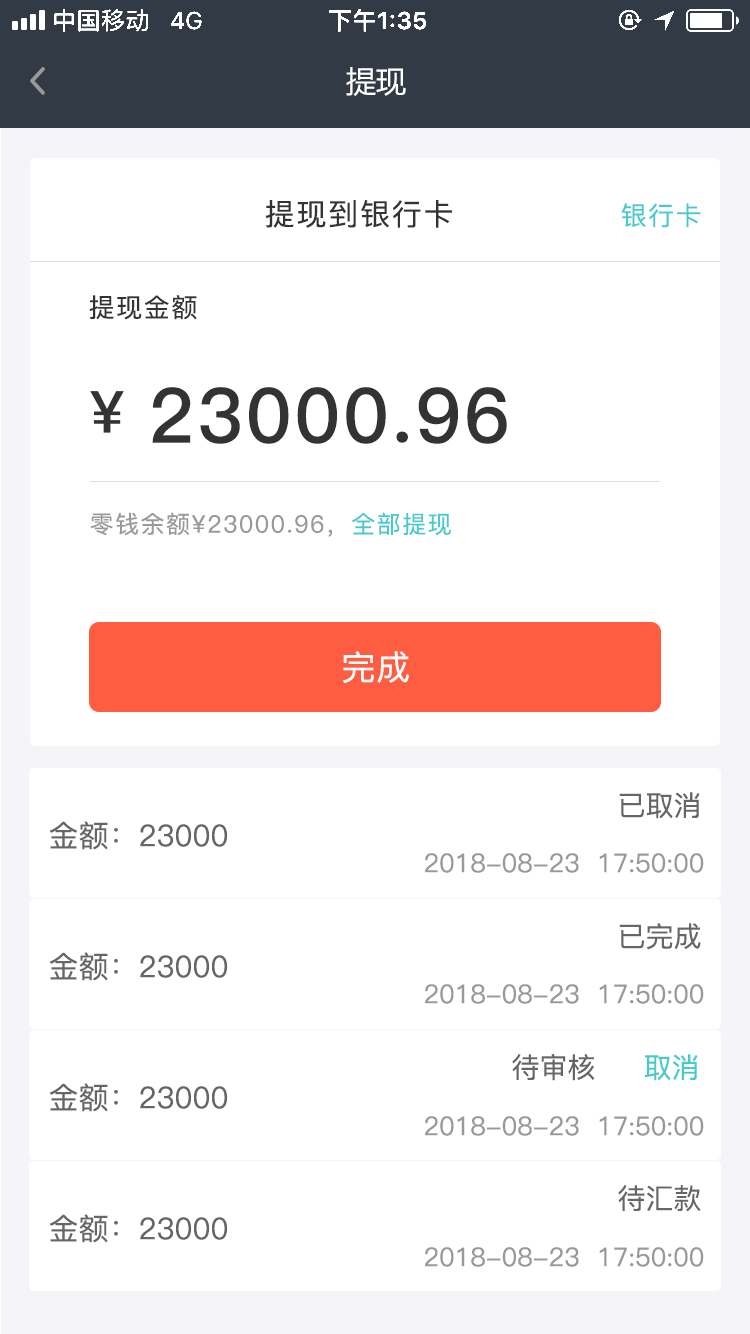
<style>
.page{position:relative;width:750px;height:1334px;background:#ffffff}
.page>*{position:absolute;margin:0}
.t1{font:30px "MicrosoftYaHeiUI";color:#ffffff}
.t2{font:30px "PingFang-SC-Medium";letter-spacing:0.06em;color:#333333}
.t3{font:26px "PingFang-SC-Medium";letter-spacing:0.06em;color:#47cacc}
.t4{font:26px "PingFang-SC-Medium";letter-spacing:0.06em;color:#333333}
.t5{font:76px "PingFang-SC-Bold";letter-spacing:0.04em;color:#333333}
.t6{font:24px "PingFang-SC-Medium";letter-spacing:0.06em;color:#999999}
.t7{font:24px "PingFang-SC-Medium";letter-spacing:0.06em;color:#47cacc}
.t8{font:34px "PingFang-SC-Medium";letter-spacing:0.02em;color:#ffffff}
.t9{font:28px "PingFang-SC-Medium";color:#666666}
.t10{font:30px "PingFang-SC-Medium";color:#666666}
.t11{font:26px "PingFang-SC-Medium";color:#999999}
.t12{font:28px "PingFang-SC-Medium";color:#47cacc}
</style>
<div class="page">
<p class="t1" style="left:346px;top:67px;width:60px;height:29px">提现</p>
<p class="t2" style="left:265px;top:200px;width:187px;height:28px">提现到银行卡</p>
<p class="t3" style="left:621px;top:203px;width:80px;height:25px">银行卡</p>
<p class="t4" style="left:89px;top:295px;width:108px;height:25px">提现金额</p>
<p class="t5" style="left:152px;top:387px;width:355px;height:57px">23000.96</p>
<p class="t6" style="left:90px;top:512px;width:361px;height:25px">零钱余额¥23000.96，<span class="t7">全部提现</span></p>
<p class="t8" style="left:343px;top:651px;width:66px;height:32px">完成</p>
<p class="t9" style="left:619px;top:792px;width:81px;height:27px">已取消</p>
<p class="t10" style="left:49px;top:821px;width:179px;height:29px">金额：23000</p>
<p class="t11" style="left:425px;top:853px;width:279px;height:20px">2018-08-23  17:50:00</p>
<p class="t9" style="left:619px;top:923px;width:82px;height:27px">已完成</p>
<p class="t10" style="left:49px;top:952px;width:179px;height:29px">金额：23000</p>
<p class="t11" style="left:425px;top:984px;width:279px;height:20px">2018-08-23  17:50:00</p>
<p class="t9" style="left:512px;top:1054px;width:83px;height:27px">待审核</p>
<p class="t12" style="left:644px;top:1054px;width:54px;height:27px">取消</p>
<p class="t10" style="left:49px;top:1083px;width:179px;height:29px">金额：23000</p>
<p class="t11" style="left:425px;top:1116px;width:279px;height:20px">2018-08-23  17:50:00</p>
<p class="t9" style="left:618px;top:1185px;width:83px;height:27px">待汇款</p>
<p class="t10" style="left:49px;top:1214px;width:179px;height:29px">金额：23000</p>
<p class="t11" style="left:425px;top:1247px;width:279px;height:20px">2018-08-23  17:50:00</p>
</div>
